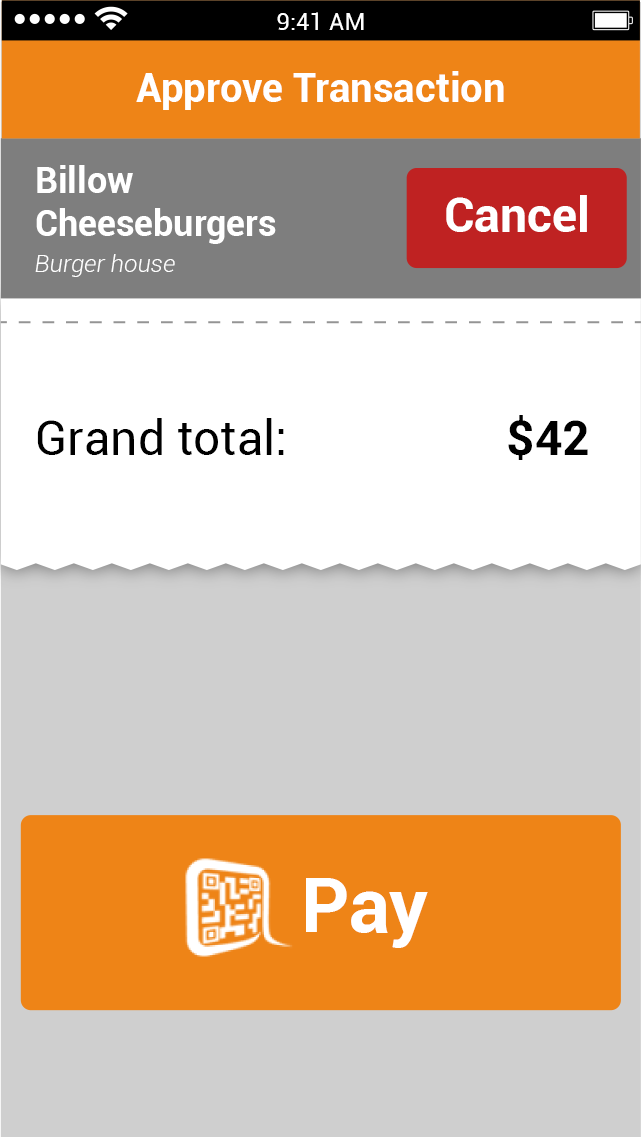
<style>
.page{position:relative;width:641px;height:1137px;background:#cfcfcf}
.page>*{position:absolute;margin:0}
.t1{font:24px "Roboto-Regular";color:#ffffff}
.t2{font:40px "Roboto-Bold";color:#ffffff}
.t3{font:36px "Roboto-Bold";color:#ffffff}
.t4{font:48px "Roboto-Bold";color:#ffffff}
.t5{font:24px "Roboto-LightItalic";color:#ffffff}
.t6{font:48px "Roboto-Regular";color:#000000}
.t7{font:48px "Roboto-Bold";color:#000000}
.t8{font:76px "Roboto-Bold";color:#ffffff}
</style>
<div class="page">
<p class="t1" style="left:277px;top:12px;width:87px;height:18px">9:41 AM</p>
<p class="t2" style="left:136px;top:71px;width:368px;height:39px">Approve Transaction</p>
<p class="t3" style="left:36px;top:165px;width:240px;height:79px">Billow<br>Cheeseburgers</p>
<p class="t4" style="left:446px;top:195px;width:141px;height:37px">Cancel</p>
<p class="t5" style="left:35px;top:254px;width:140px;height:23px">Burger house</p>
<p class="t6" style="left:37px;top:418px;width:247px;height:37px">Grand total:</p>
<p class="t7" style="left:508px;top:415px;width:80px;height:45px">$42</p>
<p class="t8" style="left:306px;top:878px;width:122px;height:70px">Pay</p>
</div>
